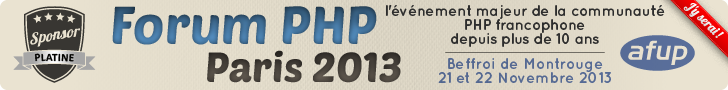
<style>
.page{position:relative;width:728px;height:90px}
.page>*{position:absolute;margin:0}
.t1{font:52.4px "PoetsenOne-Regular"}
.t2{font:15px/14px "QuicksandBold-Regular";letter-spacing:-0.025em;color:#2d2d2d}
.t3{font:15px/14px "QuicksandBold-Regular";color:#2d2d2d}
.t4{font:11px "Calibri-Bold";letter-spacing:0.025em;color:#020200}
.t5{font:41.4px "PoetsenOne-Regular";color:#454039}
.t6{font:15px/14px "QuicksandBold-Regular";color:#556993}
</style>
<div class="page">
<p class="t1" style="left:112px;top:6px;width:265px;height:39px">Forum PHP</p>
<p class="t2" style="left:386px;top:5px;width:279px;height:42px;text-align:center">l'événement majeur de <span class="t3">la</span> communauté<br>PHP francophone<br>depuis plus de 10 ans</p>
<p class="t4" style="left:34px;top:53px;width:40px;height:9px">PLATINE</p>
<p class="t5" style="left:207px;top:50px;width:194px;height:33px">Paris 2013</p>
<p class="t6" style="left:438px;top:58px;width:173px;height:25px;text-align:center">Beffroi de Montrouge<br>21 et 22 Novembre 2013</p>
</div>
